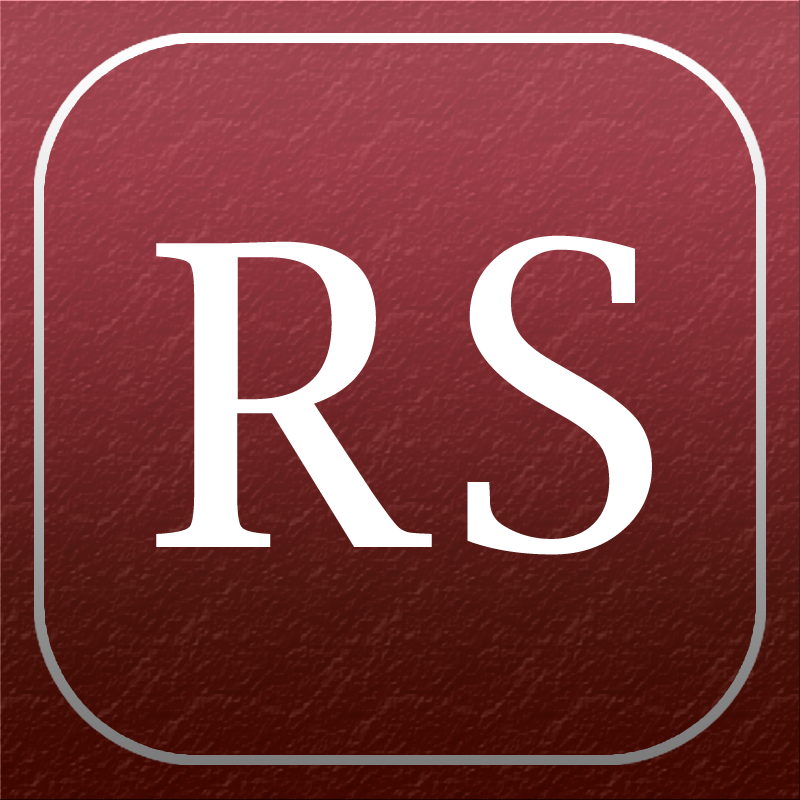
<style>
.page{position:relative;width:800px;height:800px}
.page>*{position:absolute;margin:0}
.t1{font:420px "LucidaBright";letter-spacing:0.025em;color:#ffffff}
</style>
<div class="page">
<p class="t1" style="left:156px;top:235px;width:496px;height:320px">RS</p>
</div>
